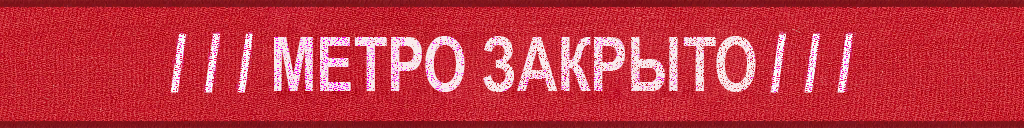
<style>
.page{position:relative;width:1024px;height:128px}
.page>*{position:absolute;margin:0}
.t1{font:75px "Arial-BoldMT";color:#f8f4f8;scale:0.74 1}
</style>
<div class="page">
<p class="t1" style="left:274px;top:36px;width:482px;height:56px;opacity:0.87">МЕТРО ЗАКРЫТО</p>
</div>
